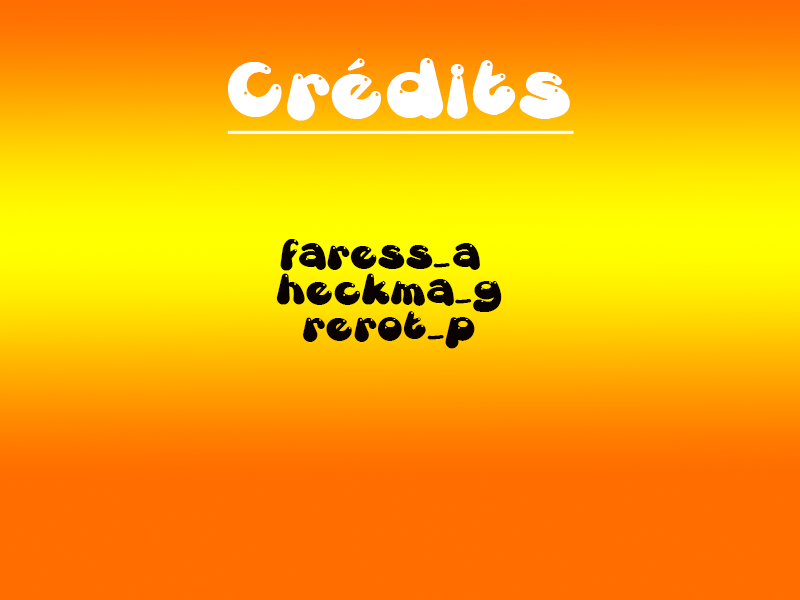
<style>
.page{position:relative;width:800px;height:600px}
.page>*{position:absolute;margin:0}
.t1{font:58px "GretoonHighlight";letter-spacing:0.1em;color:#ffffff;text-decoration:underline}
.t2{font:30px "GretoonHighlight";letter-spacing:0.1em;color:#0a0101}
</style>
<div class="page">
<p class="t1" style="left:227px;top:58px;width:347px;height:76px">Crédits</p>
<p class="t2" style="left:276px;top:239px;width:226px;height:110px;text-align:center">faress_a <br>heckma_g<br>rerot_p</p>
</div>
